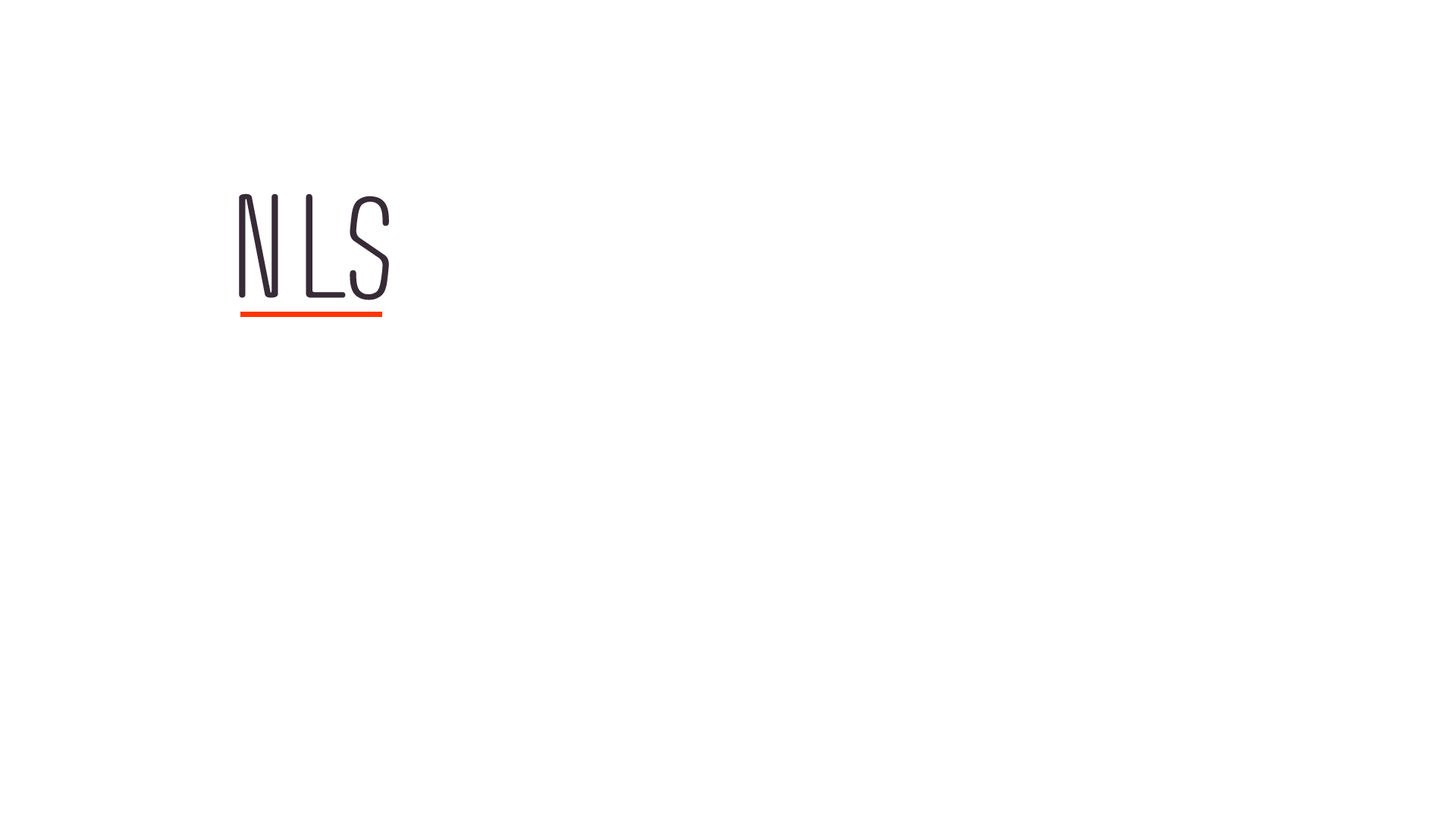
<style>
.page{position:relative;width:1456px;height:819px;background:#ffffff}
.page>*{position:absolute;margin:0}
.t1{font:131px "Usuazi-Hosomozi";letter-spacing:0.075em;color:#362b36;scale:1.1 1}
</style>
<div class="page">
<p class="t1" style="left:239px;top:193px;width:107px;height:105px">NL</p>
<p class="t1" style="left:350px;top:196px;width:39px;height:104px">S</p>
</div>
